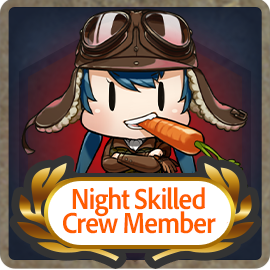
<style>
.page{position:relative;width:270px;height:270px}
.page>*{position:absolute;margin:0}
.t1{font:30px/24px "AdobeClean-Bold";letter-spacing:-0.04em;color:#ff5d00;scale:0.9 1}
</style>
<div class="page">
<p class="t1" style="left:63px;top:187px;width:153px;height:47px;text-align:center">Night Skilled<br>Crew Member</p>
</div>
